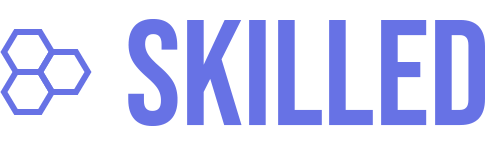
<style>
.page{position:relative;width:487px;height:144px;background:#ffffff}
.page>*{position:absolute;margin:0}
.t1{font:150px "BebasNeue-Regular";color:#6772e5;text-transform:uppercase}
</style>
<div class="page">
<p class="t1" style="left:128px;top:19px;width:357px;height:107px">SkillED</p>
</div>
